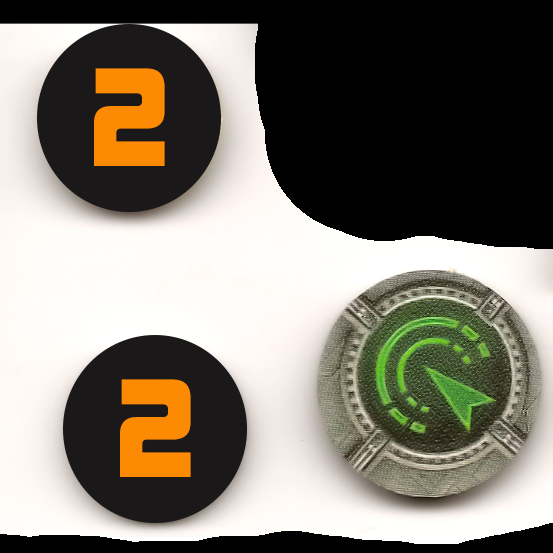
<style>
.page{position:relative;width:553px;height:553px;background:#000000}
.page>*{position:absolute;margin:0}
.t1{font:128px "KimberleyBl-Regular";color:#fd8a03}
</style>
<div class="page">
<p class="t1" style="left:94px;top:68px;width:71px;height:98px">2</p>
<p class="t1" style="left:120px;top:379px;width:71px;height:98px">2</p>
</div>
